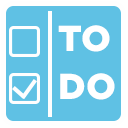
<style>
.page{position:relative;width:128px;height:128px;background:#5fc1e4}
.page>*{position:absolute;margin:0}
.t1{font:36px/48px "Gotham-Black";letter-spacing:0.02em;color:#ffffff}
</style>
<div class="page">
<p class="t1" style="left:58px;top:25px;width:57px;height:75px">TO<br>DO</p>
</div>
